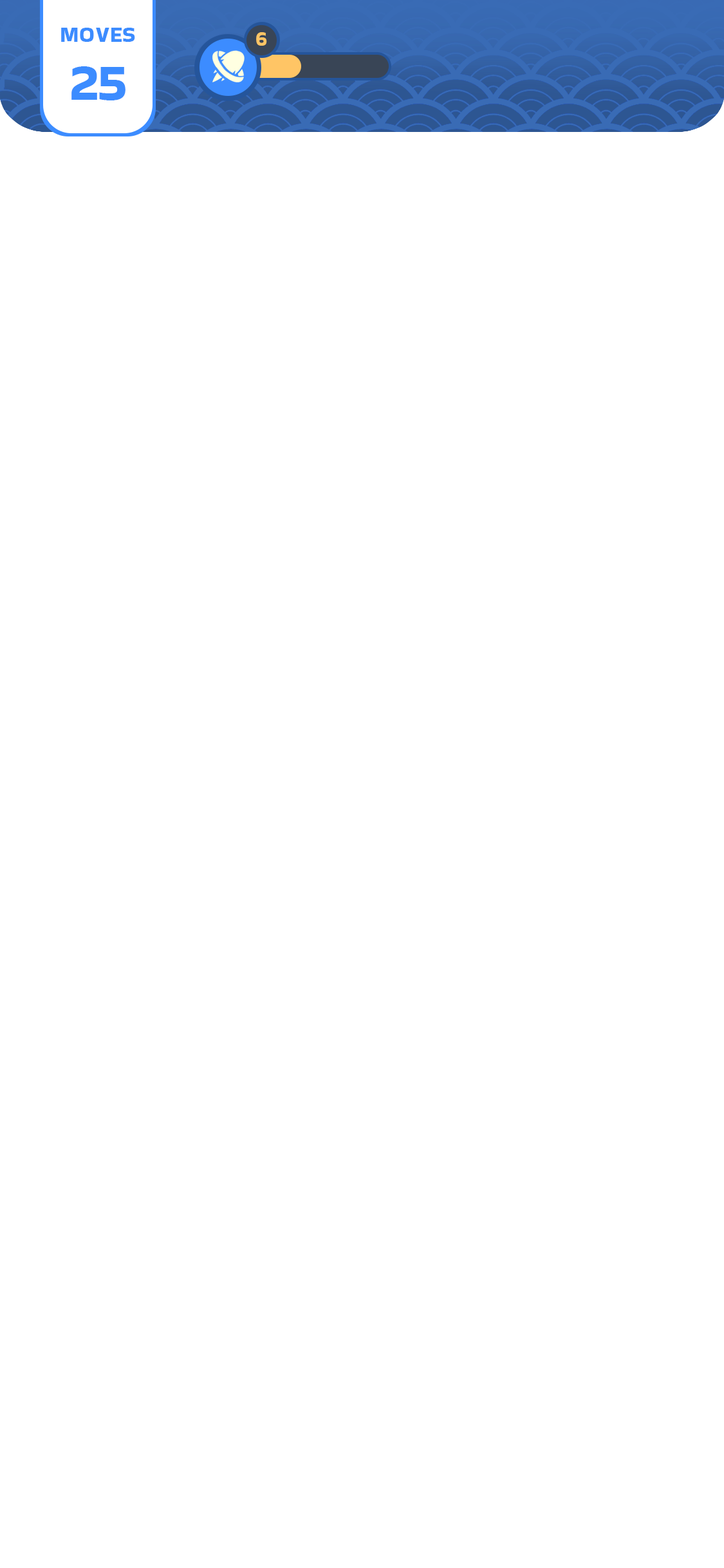
<style>
.page{position:relative;width:724px;height:1568px;background:#ffffff}
.page>*{position:absolute;margin:0}
.t1{font:22.2px "BakbakOne-Regular";color:#3c8cff}
.t2{font:21.6px "BakbakOne-Regular";color:#ffc565}
.t3{font:54.1px "BakbakOne-Regular";color:#3c8cff}
</style>
<div class="page">
<p class="t1" style="left:61px;top:28px;width:74px;height:14px">MOVES</p>
<p class="t2" style="left:256px;top:32px;width:11px;height:14px">6</p>
<p class="t3" style="left:71px;top:66px;width:55px;height:34px">25</p>
</div>
